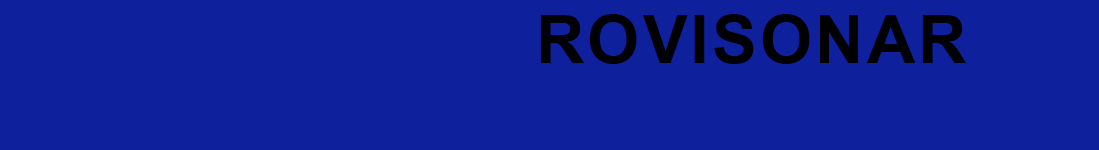
<style>
.page{position:relative;width:1099px;height:150px;background:#0f209d}
.page>*{position:absolute;margin:0}
.t1{font:66.7px "Arial-BoldMT";letter-spacing:0.05em;color:#000000}
.t2{font:66.7px "Arial-BoldMT";letter-spacing:0.05em;color:#0f209d}
</style>
<div class="page">
<p class="t1" style="left:492px;top:14px;width:474px;height:50px"><span class="t2">P</span>ROVISONAR</p>
</div>
